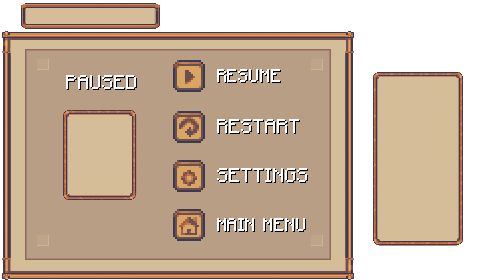
<style>
.page{position:relative;width:480px;height:280px;background:#b99e86}
.page>*{position:absolute;margin:0}
.t1{font:20px "Minecraft-Regular";color:#ffffff}
.t2{font:20px "Minecraft-Regular"}
.t3{font:18px "Minecraft-Regular";color:#ffffff}
.t4{font:18px "Minecraft-Regular"}
.t5{font:18px "Minecraft-Regular";color:#fefefe}
</style>
<div class="page">
<p class="t1" style="left:66px;top:75px;width:70px;height:14px">PAUSED</p>
<p class="t2" style="left:67px;top:76px;width:70px;height:14px">PAUSED</p>
<p class="t3" style="left:217px;top:69px;width:63px;height:13px">RESUME</p>
<p class="t4" style="left:218px;top:70px;width:63px;height:13px">RESUME</p>
<p class="t1" style="left:217px;top:119px;width:82px;height:14px">RESTART</p>
<p class="t2" style="left:218px;top:120px;width:82px;height:14px">RESTART</p>
<p class="t1" style="left:217px;top:168px;width:90px;height:14px">SETTINGS</p>
<p class="t2" style="left:218px;top:169px;width:90px;height:14px">SETTINGS</p>
<p class="t5" style="left:217px;top:218px;width:88px;height:13px">MAIN MENU</p>
<p class="t4" style="left:218px;top:219px;width:88px;height:13px">MAIN MENU</p>
</div>
